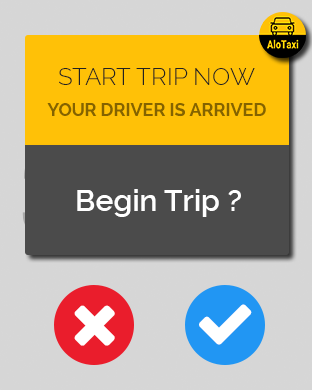
<style>
.page{position:relative;width:312px;height:390px;background:#d6d6d6}
.page>*{position:absolute;margin:0}
.t1{font:24px "Raleway-Light";color:#212121;text-transform:uppercase}
.t2{font:18px "Raleway-Bold";color:#856400;text-transform:uppercase}
.t3{font:30px "Raleway-SemiBold";color:#ffffff}
</style>
<div class="page">
<p class="t1" style="left:59px;top:68px;width:196px;height:17px">Start trip now</p>
<p class="t2" style="left:47px;top:103px;width:219px;height:14px">Your driver is arrived</p>
<p class="t3" style="left:77px;top:189px;width:164px;height:28px">Begin Trip ?</p>
</div>
